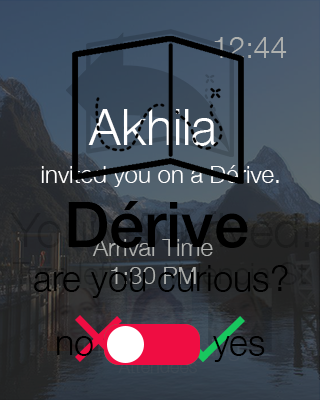
<style>
.page{position:relative;width:320px;height:400px}
.page>*{position:absolute;margin:0}
.t1{font:30px "HelveticaNeue-Light";color:#afb1af}
.t2{font:50.3px "HelveticaNeue-Light";color:#ffffff}
.t3{font:24px "HelveticaNeue-Light";color:#ffffff}
.t4{font:62.9px "HelveticaNeue-Medium";color:#000000}
.t5{font:24px "HelveticaNeue-Light";color:#afb1af}
.t6{font:36px "HelveticaNeue-Light";color:#000000}
</style>
<div class="page">
<p class="t1" style="left:214px;top:37px;width:73px;height:21px">12:44</p>
<p class="t2" style="left:88px;top:109px;width:129px;height:37px">Akhila</p>
<p class="t3" style="left:41px;top:165px;width:238px;height:22px">invited you on a Dérive.</p>
<p class="t4" style="left:68px;top:201px;width:180px;height:47px">Dérive</p>
<p class="t5" style="left:92px;top:239px;width:121px;height:45px;text-align:center">Arrival Time<br>1:30 PM</p>
<p class="t6" style="left:34px;top:265px;width:254px;height:33px">are you curious?</p>
<p class="t6" style="left:57px;top:336px;width:36px;height:20px">no</p>
<p class="t6" style="left:213px;top:336px;width:52px;height:26px">yes</p>
</div>
